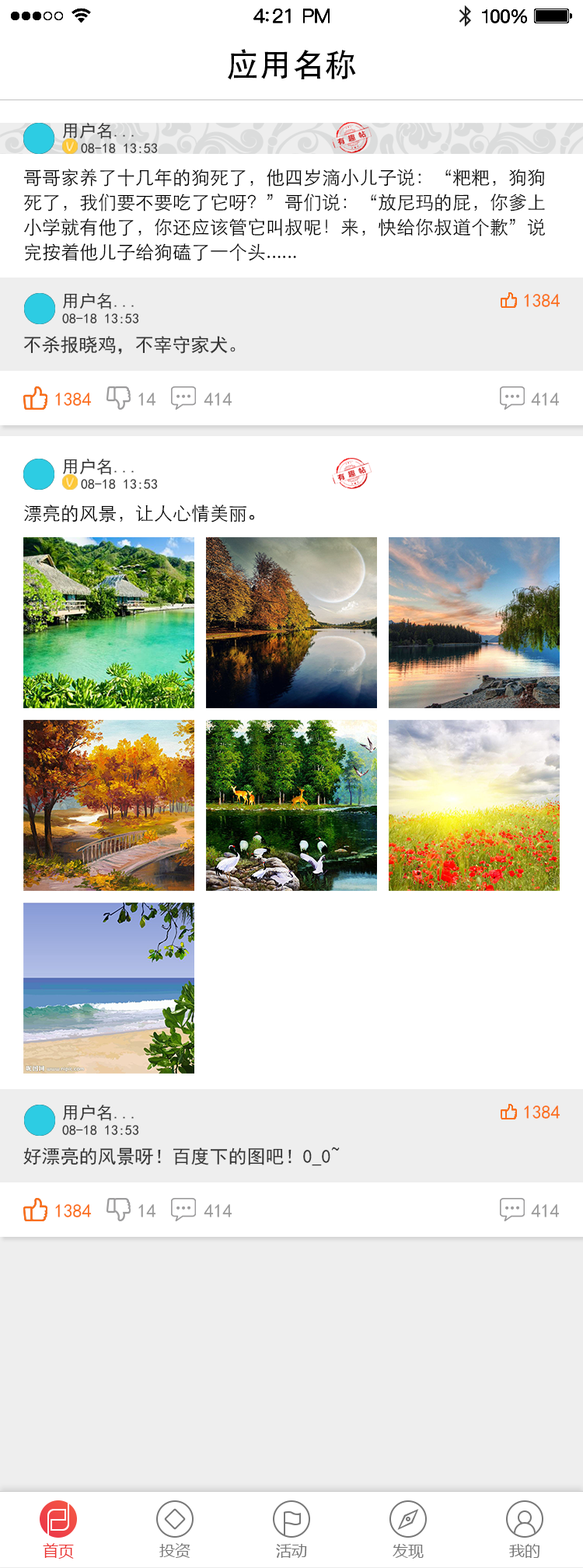
<style>
.page{position:relative;width:583px;height:1568px;background:#ffffff}
.page>*{position:absolute;margin:0}
.t1{font:32.7px "PingFang-SC-Medium";color:#000000}
.t2{font:17.1px "SimHei";color:#333333}
.t3{font:14px "SimHei";color:#333333}
.t4{font:18.7px/24.9px "STXihei";color:#000000}
.t5{font:18.7px "SimHei";color:#fb6e19}
.t6{font:18.7px "SimHei";color:#333333}
.t7{font:18.7px "SimHei";color:#999999}
.t8{font:18.7px "STXihei";color:#000000}
.t9{font:15.5px "MicrosoftYaHei";color:#eb3331}
.t10{font:15.5px "MicrosoftYaHei";color:#777777}
</style>
<div class="page">
<p class="t1" style="left:228px;top:49px;width:128px;height:31px">应用名称</p>
<p class="t2" style="left:63px;top:123px;width:71px;height:16px">用户名...</p>
<p class="t3" style="left:81px;top:143px;width:77px;height:10px">08-18 13:53</p>
<p class="t4" style="left:23px;top:169px;width:522px;height:92px">哥哥家养了十几年的狗死了，他四岁滴小儿子说：“粑粑，狗狗<br>死了，我们要不要吃了它呀？”哥们说：“放尼玛的屁，你爹上<br>小学就有他了，你还应该管它叫叔呢！来，快给你叔道个歉”说<br>完按着他儿子给狗磕了一个头......</p>
<p class="t2" style="left:63px;top:293px;width:71px;height:16px">用户名...</p>
<p class="t5" style="left:524px;top:294px;width:36px;height:13px">1384</p>
<p class="t3" style="left:62px;top:313px;width:77px;height:10px">08-18 13:53</p>
<p class="t6" style="left:24px;top:336px;width:212px;height:18px">不杀报晓鸡，不宰守家犬。</p>
<p class="t5" style="left:55px;top:393px;width:37px;height:13px">1384</p>
<p class="t7" style="left:138px;top:393px;width:18px;height:13px">14</p>
<p class="t7" style="left:204px;top:393px;width:28px;height:13px">414</p>
<p class="t7" style="left:531px;top:393px;width:29px;height:13px">414</p>
<p class="t2" style="left:63px;top:459px;width:71px;height:16px">用户名...</p>
<p class="t3" style="left:81px;top:479px;width:77px;height:10px">08-18 13:53</p>
<p class="t8" style="left:24px;top:505px;width:231px;height:17px">漂亮的风景，让人心情美丽。</p>
<p class="t2" style="left:63px;top:1105px;width:71px;height:16px">用户名...</p>
<p class="t5" style="left:524px;top:1105px;width:36px;height:14px">1384</p>
<p class="t3" style="left:62px;top:1125px;width:77px;height:10px">08-18 13:53</p>
<p class="t6" style="left:23px;top:1147px;width:317px;height:19px">好漂亮的风景呀！百度下的图吧！0_0~</p>
<p class="t5" style="left:55px;top:1204px;width:37px;height:13px">1384</p>
<p class="t7" style="left:138px;top:1204px;width:18px;height:13px">14</p>
<p class="t7" style="left:204px;top:1204px;width:28px;height:13px">414</p>
<p class="t7" style="left:531px;top:1204px;width:29px;height:13px">414</p>
<p class="t9" style="left:43px;top:1543px;width:31px;height:16px">首页</p>
<p class="t10" style="left:159px;top:1543px;width:31px;height:15px">投资</p>
<p class="t10" style="left:276px;top:1544px;width:31px;height:14px">活动</p>
<p class="t10" style="left:393px;top:1544px;width:31px;height:15px">发现</p>
<p class="t10" style="left:509px;top:1544px;width:31px;height:14px">我的</p>
</div>
